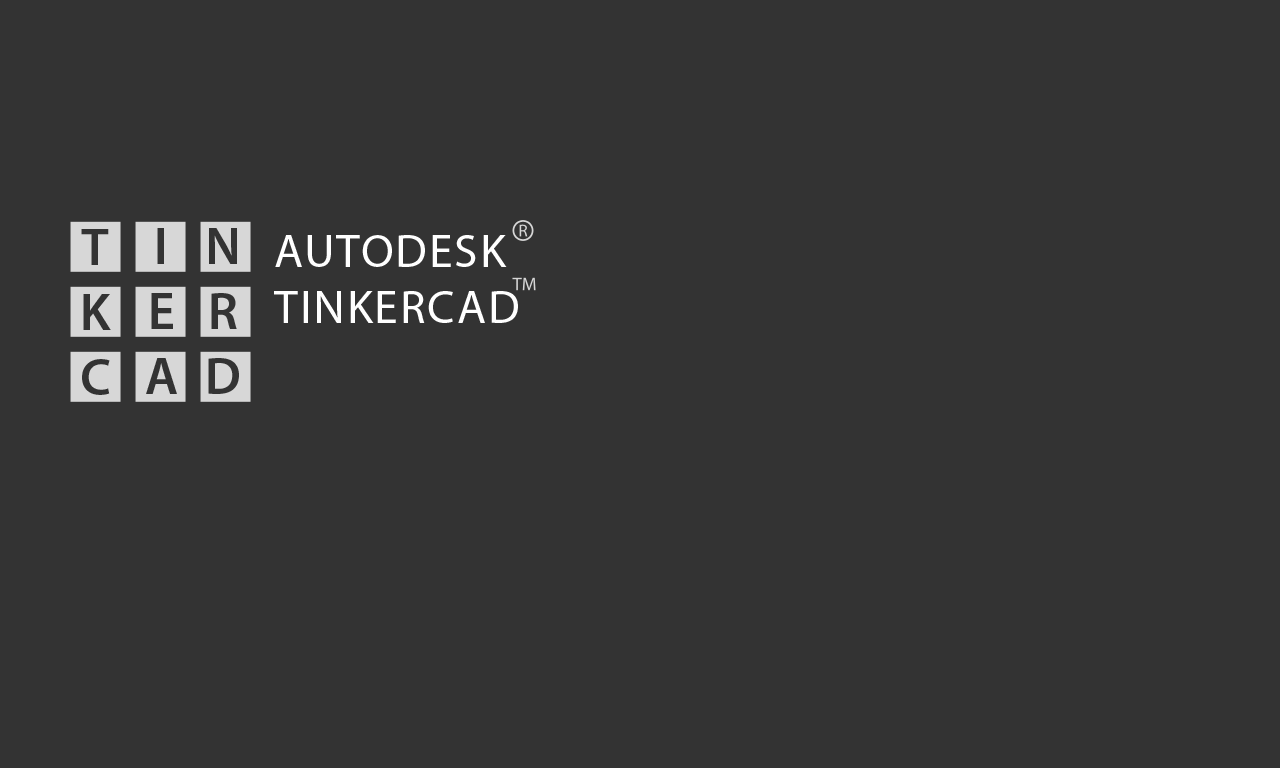
<style>
.page{position:relative;width:1280px;height:768px;background:#333333}
.page>*{position:absolute;margin:0}
.t1{font:47.3px "MyriadPro-Regular";letter-spacing:0.044em;color:#ffffff}
</style>
<div class="page">
<p class="t1" style="left:275px;top:235px;width:232px;height:32px">AUTODESK</p>
<p class="t1" style="left:274px;top:291px;width:244px;height:32px">TINKERCAD</p>
</div>
